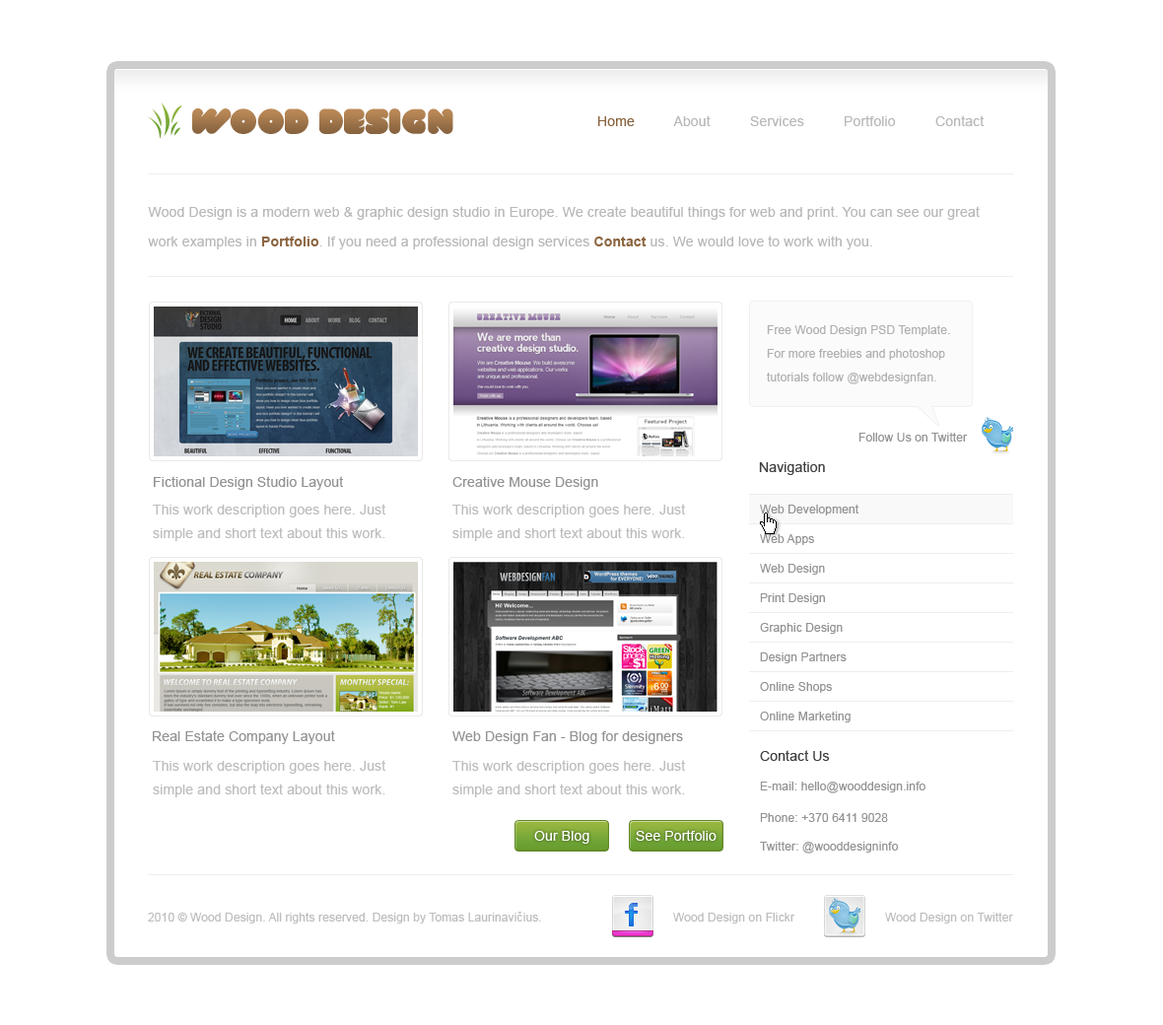
<style>
.page{position:relative;width:1163px;height:1025px;background:#ffffff}
.page>*{position:absolute;margin:0}
.t1{font:35.5px "VAL";letter-spacing:0.01em;color:#a1764b}
.t2{font:13.8px "ArialMT";letter-spacing:0.01em;color:#b8b8b8}
.t3{font:13.8px "ArialMT";letter-spacing:0.01em;color:#8a6540}
.t4{font:13.8px/29.6px "ArialMT";letter-spacing:0.01em;color:#b8b8b8}
.t5{font:13.8px/29.6px "Arial-BoldMT";letter-spacing:0.01em;color:#8c6641}
.t6{font:11.8px/23.7px "ArialMT";letter-spacing:0.01em;color:#b0b0b0}
.t7{font:11.8px "ArialMT";letter-spacing:0.01em;color:#939393}
.t8{font:13.8px "ArialMT";letter-spacing:0.01em;color:#404040}
.t9{font:13.8px "ArialMT";letter-spacing:0.01em;color:#939393}
.t10{font:13.8px/23.7px "ArialMT";letter-spacing:0.01em;color:#bdbdbd}
.t11{font:11.8px/29.6px "ArialMT";letter-spacing:0.01em;color:#939393}
.t12{font:13.8px "ArialMT";letter-spacing:0.01em;color:#ffffff}
.t13{font:11.8px "ArialMT";letter-spacing:0.01em;color:#bdbdbd}
</style>
<div class="page">
<p class="t1" style="left:192px;top:107px;width:261px;height:27px">Wood Design</p>
<p class="t2" style="left:598px;top:115px;width:387px;height:11px"><span class="t3">Home </span>         About          Services          Portfolio          Contact</p>
<p class="t4" style="left:148px;top:206px;width:832px;height:43px">Wood Design is a modern web &amp; graphic design studio in Europe. We create beautiful things for web and print. You can see our great work examples in <span class="t5">Portfolio</span>. If you need a professional design services <span class="t5">Contact</span> us. We would love to work with you.</p>
<p class="t6" style="left:767px;top:325px;width:183px;height:59px">Free Wood Design PSD Template. For more freebies and photoshop tutorials follow @webdesignfan.</p>
<p class="t7" style="left:859px;top:433px;width:109px;height:9px">Follow Us on Twitter</p>
<p class="t8" style="left:759px;top:461px;width:66px;height:14px">Navigation</p>
<p class="t9" style="left:154px;top:476px;width:190px;height:14px">Fictional Design Studio Layout</p>
<p class="t9" style="left:452px;top:476px;width:146px;height:14px">Creative Mouse Design</p>
<p class="t10" style="left:153px;top:504px;width:233px;height:37px">This work description goes here. Just <br>simple and short text about this work.</p>
<p class="t10" style="left:452px;top:504px;width:234px;height:37px">This work description goes here. Just <br>simple and short text about this work.</p>
<p class="t11" style="left:760px;top:505px;width:99px;height:218px">Web Development<br>Web Apps<br>Web Design<br>Print Design<br>Graphic Design<br>Design Partners<br>Online Shops<br>Online Marketing</p>
<p class="t9" style="left:153px;top:730px;width:182px;height:14px">Real Estate Company Layout</p>
<p class="t9" style="left:452px;top:731px;width:231px;height:13px">Web Design Fan - Blog for designers</p>
<p class="t10" style="left:153px;top:760px;width:233px;height:37px">This work description goes here. Just <br>simple and short text about this work.</p>
<p class="t10" style="left:452px;top:760px;width:234px;height:37px">This work description goes here. Just <br>simple and short text about this work.</p>
<p class="t8" style="left:760px;top:750px;width:70px;height:11px">Contact Us</p>
<p class="t7" style="left:760px;top:782px;width:166px;height:12px">E-mail: hello@wooddesign.info</p>
<p class="t7" style="left:760px;top:813px;width:128px;height:9px">Phone: +370 6411 9028</p>
<p class="t12" style="left:534px;top:831px;width:55px;height:13px">Our Blog</p>
<p class="t12" style="left:636px;top:830px;width:81px;height:11px">See Portfolio</p>
<p class="t7" style="left:760px;top:842px;width:139px;height:12px">Twitter: @wooddesigninfo</p>
<p class="t13" style="left:148px;top:912px;width:393px;height:12px">2010 © Wood Design. All rights reserved. Design by Tomas Laurinavičius.</p>
<p class="t13" style="left:673px;top:913px;width:122px;height:11px">Wood Design on Flickr</p>
<p class="t13" style="left:885px;top:913px;width:128px;height:11px">Wood Design on Twitter</p>
</div>
